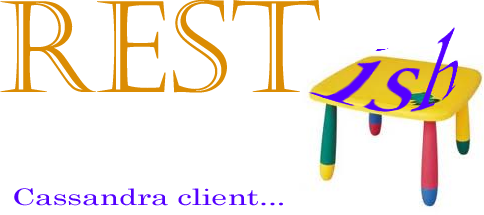
<style>
.page{position:relative;width:484px;height:215px;background:#ffffff}
.page>*{position:absolute;margin:0}
.t1{font:127px "Castellar";color:#db8c03}
.t2{font:22.6px "Century";color:#5400ff;scale:1.4 1}
</style>
<div class="page">
<p class="t1" style="left:0px;top:0px;width:320px;height:93px">REST</p>
<p class="t2" style="left:14px;top:188px;width:269px;height:18px">Cassandra client...</p>
</div>
